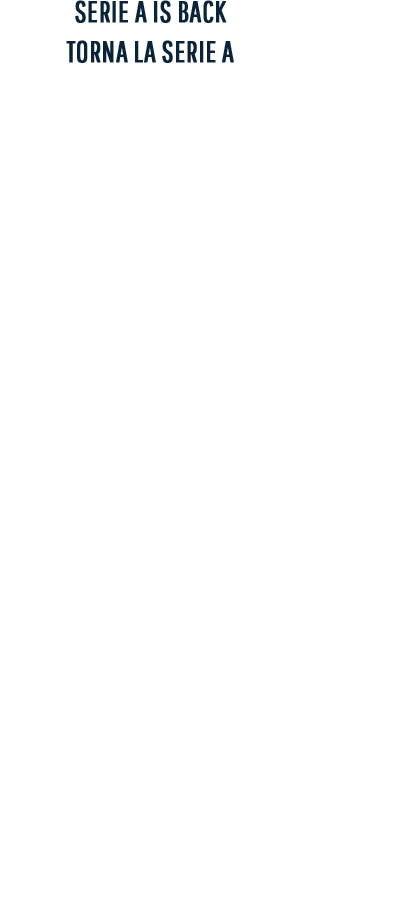
<style>
.page{position:relative;width:412px;height:908px;background:#ffffff}
.page>*{position:absolute;margin:0}
.t1{font:30px "PathwayGothicOne-Book";color:#092439;text-transform:uppercase;font-weight:bold}
</style>
<div class="page">
<p class="t1" style="left:75px;top:0px;width:152px;height:23px">Serie A is back</p>
<p class="t1" style="left:66px;top:40px;width:168px;height:23px">torna la serie A</p>
</div>
